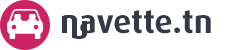
<style>
.page{position:relative;width:242px;height:50px;background:#ffffff}
.page>*{position:absolute;margin:0}
.t1{font:33px "Dax-Bold";color:#353847}
</style>
<div class="page">
<p class="t1" style="left:62px;top:10px;width:149px;height:24px">navette.tn</p>
</div>
